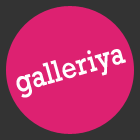
<style>
.page{position:relative;width:140px;height:140px;background:#dd2171}
.page>*{position:absolute;margin:0}
.t1{font:30.6px "Rockwell";color:#fefefe;font-weight:bold;scale:0.85 1}
</style>
<div class="page">
<p class="t1" style="left:16px;top:49px;width:110px;height:49px;rotate:-16deg">galleriya</p>
</div>
